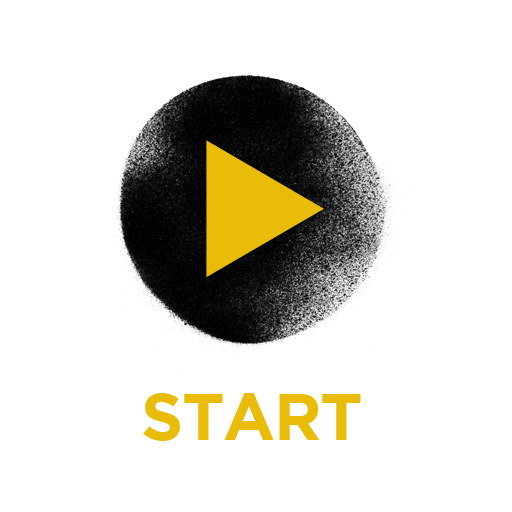
<style>
.page{position:relative;width:512px;height:512px;background:#ffffff}
.page>*{position:absolute;margin:0}
.t1{font:66.1px "GothamBold";letter-spacing:-0.02em;color:#e9bc0a}
</style>
<div class="page">
<p class="t1" style="left:143px;top:393px;width:218px;height:48px">START</p>
</div>
